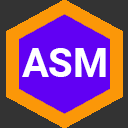
<style>
.page{position:relative;width:128px;height:128px;background:#6100f3}
.page>*{position:absolute;margin:0}
.t1{font:39.6px "Roboto-Bold";color:#ffffff}
</style>
<div class="page">
<p class="t1" style="left:22px;top:48px;width:84px;height:29px">ASM</p>
</div>
